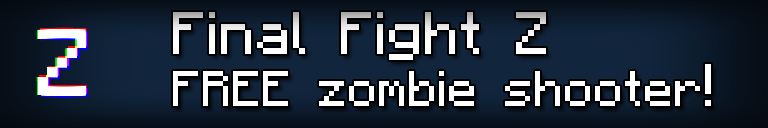
<style>
.page{position:relative;width:768px;height:128px}
.page>*{position:absolute;margin:0}
.t1{font:48px "Minecraftia";color:#ffffff}
.t2{font:40px "Minecraftia";color:#ffffff}
</style>
<div class="page">
<p class="t1" style="left:173px;top:12px;width:373px;height:48px">Final Fight Z</p>
<p class="t2" style="left:173px;top:64px;width:538px;height:42px">FREE zombie shooter<span class="t1">!</span></p>
</div>
